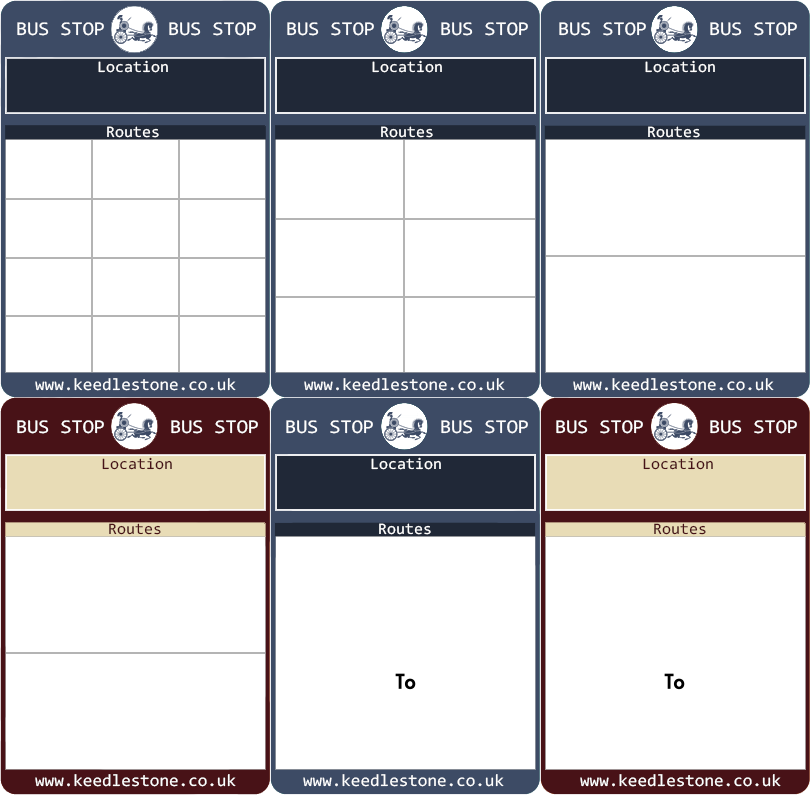
<style>
.page{position:relative;width:810px;height:795px;background:#ffffff}
.page>*{position:absolute;margin:0}
.t1{font:19.6px "Consolas";color:#ffffff;scale:1.03 1}
.t2{font:16.1px "Consolas";color:#ffffff}
.t3{font:16.9px "Consolas";color:#ffffff}
.t4{font:16.1px "Consolas";color:#481217}
</style>
<div class="page">
<p class="t1" style="left:17px;top:22px;width:87px;height:14px">BUS STOP</p>
<p class="t1" style="left:169px;top:22px;width:87px;height:14px">BUS STOP</p>
<p class="t1" style="left:287px;top:22px;width:87px;height:14px">BUS STOP</p>
<p class="t1" style="left:441px;top:22px;width:87px;height:14px">BUS STOP</p>
<p class="t1" style="left:559px;top:22px;width:87px;height:14px">BUS STOP</p>
<p class="t1" style="left:710px;top:22px;width:87px;height:14px">BUS STOP</p>
<p class="t2" style="left:98px;top:60px;width:70px;height:13px">Location</p>
<p class="t2" style="left:372px;top:60px;width:70px;height:13px">Location</p>
<p class="t2" style="left:645px;top:60px;width:70px;height:13px">Location</p>
<p class="t2" style="left:107px;top:126px;width:52px;height:12px">Routes</p>
<p class="t2" style="left:381px;top:126px;width:52px;height:12px">Routes</p>
<p class="t2" style="left:648px;top:126px;width:52px;height:12px">Routes</p>
<p class="t3" style="left:35px;top:378px;width:201px;height:13px">www.keedlestone.co.uk</p>
<p class="t3" style="left:304px;top:378px;width:201px;height:13px">www.keedlestone.co.uk</p>
<p class="t3" style="left:573px;top:378px;width:201px;height:13px">www.keedlestone.co.uk</p>
<p class="t1" style="left:17px;top:420px;width:87px;height:14px">BUS STOP</p>
<p class="t1" style="left:171px;top:420px;width:87px;height:14px">BUS STOP</p>
<p class="t1" style="left:286px;top:420px;width:87px;height:14px">BUS STOP</p>
<p class="t1" style="left:441px;top:420px;width:87px;height:14px">BUS STOP</p>
<p class="t1" style="left:556px;top:420px;width:87px;height:14px">BUS STOP</p>
<p class="t1" style="left:710px;top:420px;width:87px;height:14px">BUS STOP</p>
<p class="t4" style="left:102px;top:457px;width:70px;height:13px">Location</p>
<p class="t2" style="left:371px;top:457px;width:70px;height:13px">Location</p>
<p class="t4" style="left:643px;top:457px;width:70px;height:13px">Location</p>
<p class="t4" style="left:109px;top:523px;width:52px;height:12px">Routes</p>
<p class="t2" style="left:379px;top:523px;width:52px;height:12px">Routes</p>
<p class="t4" style="left:654px;top:523px;width:52px;height:12px">Routes</p>
<p class="t3" style="left:35px;top:774px;width:201px;height:13px">www.keedlestone.co.uk</p>
<p class="t3" style="left:303px;top:774px;width:201px;height:13px">www.keedlestone.co.uk</p>
<p class="t3" style="left:580px;top:774px;width:201px;height:13px">www.keedlestone.co.uk</p>
</div>
